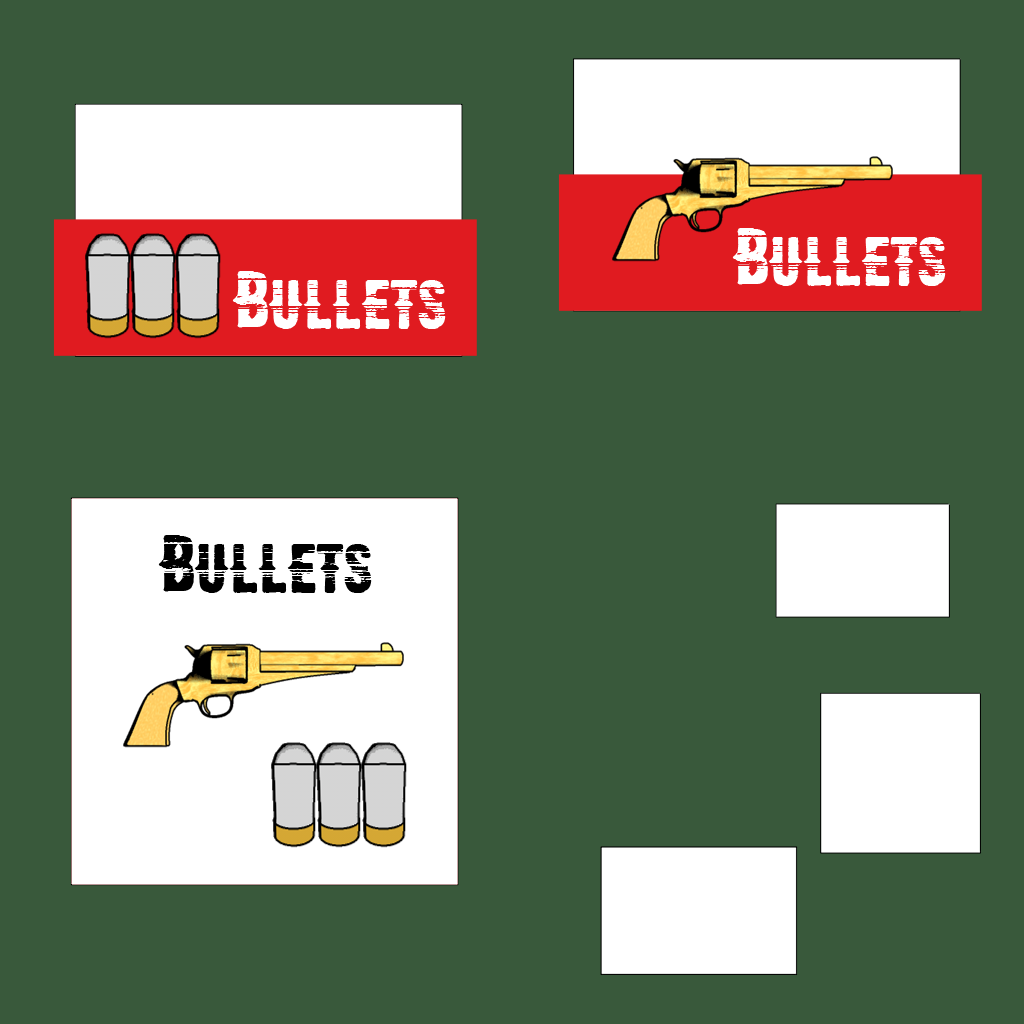
<style>
.page{position:relative;width:1024px;height:1024px;background:#39593b}
.page>*{position:absolute;margin:0}
.t1{font:72px "CMWesternWoodblockNo2";color:#ffffff}
.t2{font:72px "CMWesternWoodblockNo2";color:#000000}
</style>
<div class="page">
<p class="t1" style="left:732px;top:228px;width:214px;height:58px">Bullets</p>
<p class="t1" style="left:232px;top:271px;width:214px;height:58px">Bullets</p>
<p class="t2" style="left:158px;top:535px;width:214px;height:58px">Bullets</p>
</div>
